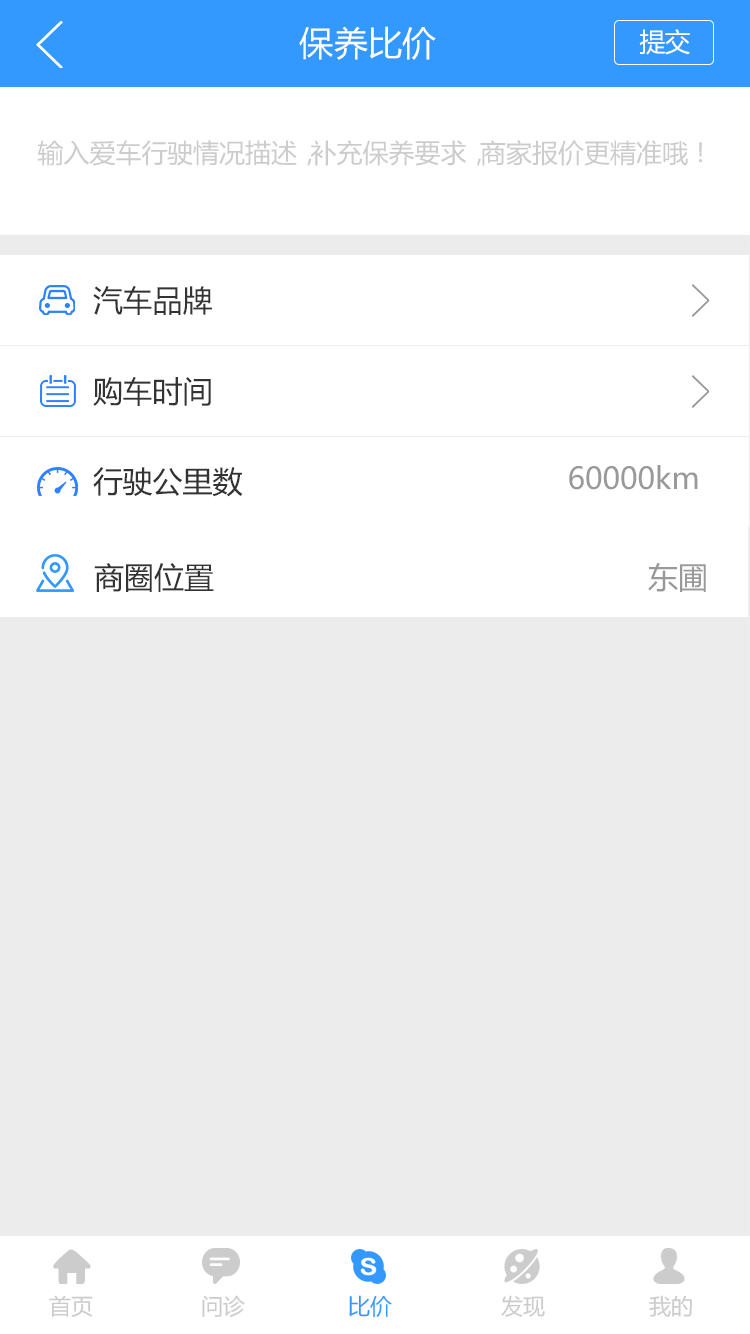
<style>
.page{position:relative;width:750px;height:1334px;background:#ececec}
.page>*{position:absolute;margin:0}
.t1{font:34px "MicrosoftYaHei";color:#ffffff}
.t2{font:26px "MicrosoftYaHei";letter-spacing:-0.04em;color:#ffffff}
.t3{font:26px "MicrosoftYaHei";color:#cccccc}
.t4{font:30px "MicrosoftYaHei";color:#333333}
.t5{font:30px "MicrosoftYaHei";color:#999999}
.t6{font:22px "MicrosoftYaHei";color:#cccccc}
.t7{font:22px "MicrosoftYaHei";color:#3399ff}
</style>
<div class="page">
<p class="t1" style="left:299px;top:26px;width:137px;height:34px">保养比价</p>
<p class="t2" style="left:639px;top:29px;width:51px;height:26px">提交</p>
<p class="t3" style="left:38px;top:140px;width:665px;height:26px">输入爱车行驶情况描述，补充保养要求，商家报价更精准哦！</p>
<p class="t4" style="left:93px;top:286px;width:119px;height:29px">汽车品牌</p>
<p class="t4" style="left:93px;top:377px;width:118px;height:29px">购车时间</p>
<p class="t4" style="left:93px;top:467px;width:150px;height:30px">行驶公里数</p>
<p class="t5" style="left:569px;top:465px;width:129px;height:25px">60000km</p>
<p class="t4" style="left:94px;top:563px;width:120px;height:29px">商圈位置</p>
<p class="t5" style="left:648px;top:563px;width:58px;height:29px">东圃</p>
<p class="t6" style="left:49px;top:1295px;width:44px;height:22px">首页</p>
<p class="t6" style="left:202px;top:1295px;width:43px;height:22px">问诊</p>
<p class="t7" style="left:349px;top:1295px;width:43px;height:22px">比价</p>
<p class="t6" style="left:501px;top:1295px;width:44px;height:22px">发现</p>
<p class="t6" style="left:649px;top:1295px;width:43px;height:22px">我的</p>
</div>
